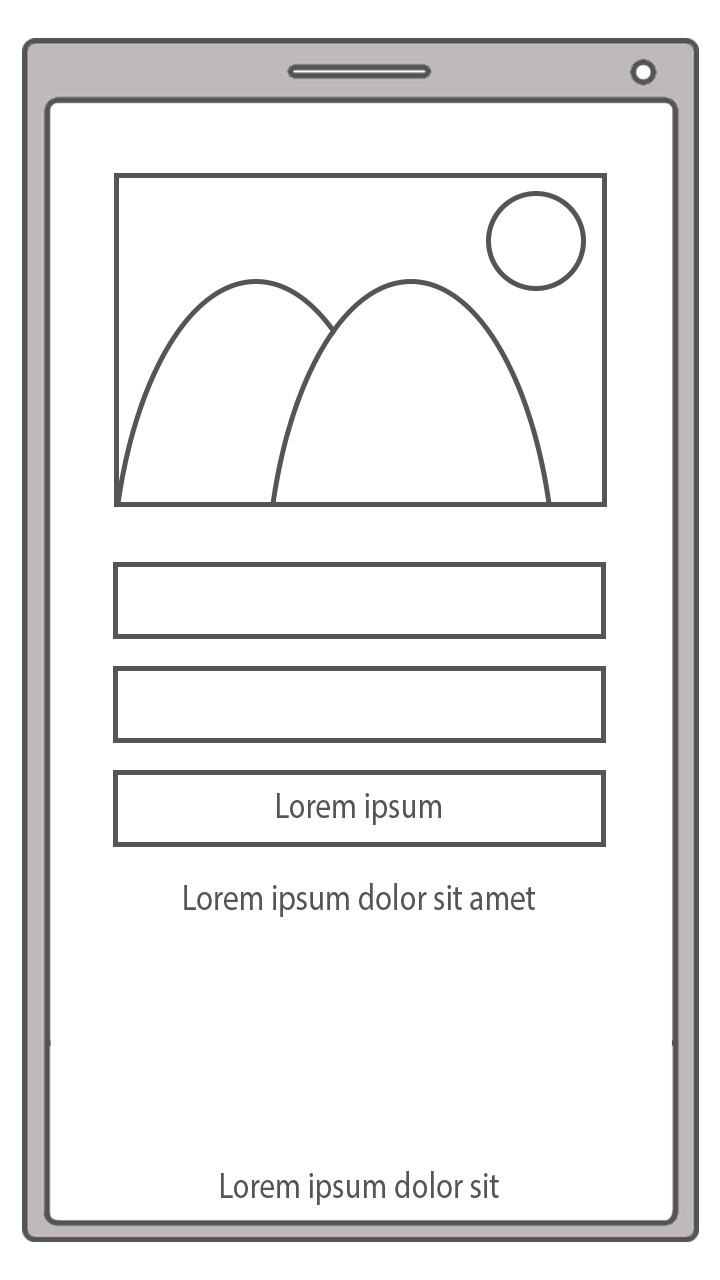
<style>
.page{position:relative;width:720px;height:1280px;background:#ffffff}
.page>*{position:absolute;margin:0}
.t1{font:36.8px "MyriadPro-Regular";color:#555555;scale:0.84 1}
</style>
<div class="page">
<p class="t1" style="left:277px;top:793px;width:164px;height:32px">Lorem ipsum</p>
<p class="t1" style="left:184px;top:883px;width:351px;height:34px">Lorem ipsum dolor sit amet</p>
<p class="t1" style="left:221px;top:1171px;width:278px;height:34px">Lorem ipsum dolor sit</p>
</div>
